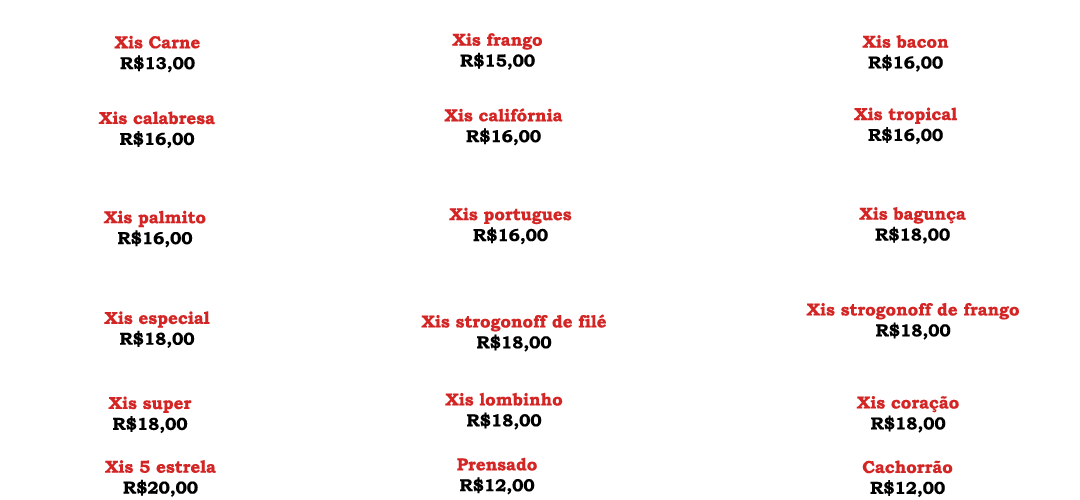
<style>
.page{position:relative;width:1080px;height:500px;background:#ffffff}
.page>*{position:absolute;margin:0}
.t1{font:17.4px "BookmanOldStyle-Bold";color:#d42525}
.t2{font:17.4px "BookmanOldStyle-Bold";color:#000000}
</style>
<div class="page">
<p class="t1" style="left:114px;top:35px;width:86px;height:38px;text-align:center">Xis Carne<br><span class="t2">R$13,00</span></p>
<p class="t1" style="left:452px;top:33px;width:90px;height:37px;text-align:center">Xis frango<br><span class="t2">R$15,00</span></p>
<p class="t1" style="left:862px;top:35px;width:87px;height:37px;text-align:center">Xis bacon<br><span class="t2">R$16,00</span></p>
<p class="t1" style="left:98px;top:111px;width:117px;height:38px;text-align:center">Xis calabresa<br><span class="t2">R$16,00</span></p>
<p class="t1" style="left:444px;top:108px;width:119px;height:38px;text-align:center">Xis califórnia<br><span class="t2">R$16,00</span></p>
<p class="t1" style="left:854px;top:107px;width:103px;height:38px;text-align:center">Xis tropical<br><span class="t2">R$16,00</span></p>
<p class="t1" style="left:449px;top:207px;width:123px;height:38px;text-align:center">Xis portugues<br><span class="t2">R$16,00</span></p>
<p class="t1" style="left:859px;top:207px;width:107px;height:37px;text-align:center">Xis bagunça<br><span class="t2">R$18,00</span></p>
<p class="t1" style="left:103px;top:210px;width:103px;height:38px;text-align:center">Xis palmito<br><span class="t2">R$16,00</span></p>
<p class="t1" style="left:806px;top:303px;width:213px;height:37px;text-align:center">Xis strogonoff de frango<br><span class="t2">R$18,00</span></p>
<p class="t1" style="left:104px;top:311px;width:106px;height:37px;text-align:center">Xis especial<br><span class="t2">R$18,00</span></p>
<p class="t1" style="left:421px;top:314px;width:185px;height:38px;text-align:center">Xis strogonoff de filé<br><span class="t2">R$18,00</span></p>
<p class="t1" style="left:108px;top:396px;width:84px;height:38px;text-align:center">Xis super<br><span class="t2">R$18,00</span></p>
<p class="t1" style="left:445px;top:392px;width:118px;height:38px;text-align:center">Xis lombinho<br><span class="t2">R$18,00</span></p>
<p class="t1" style="left:856px;top:396px;width:103px;height:37px;text-align:center">Xis coração<br><span class="t2">R$18,00</span></p>
<p class="t1" style="left:105px;top:460px;width:111px;height:37px;text-align:center">Xis 5 estrela<br><span class="t2">R$20,00</span></p>
<p class="t1" style="left:457px;top:457px;width:80px;height:38px;text-align:center">Prensado<br><span class="t2">R$12,00</span></p>
<p class="t1" style="left:862px;top:460px;width:91px;height:38px;text-align:center">Cachorrão<br><span class="t2">R$12,00</span></p>
</div>
